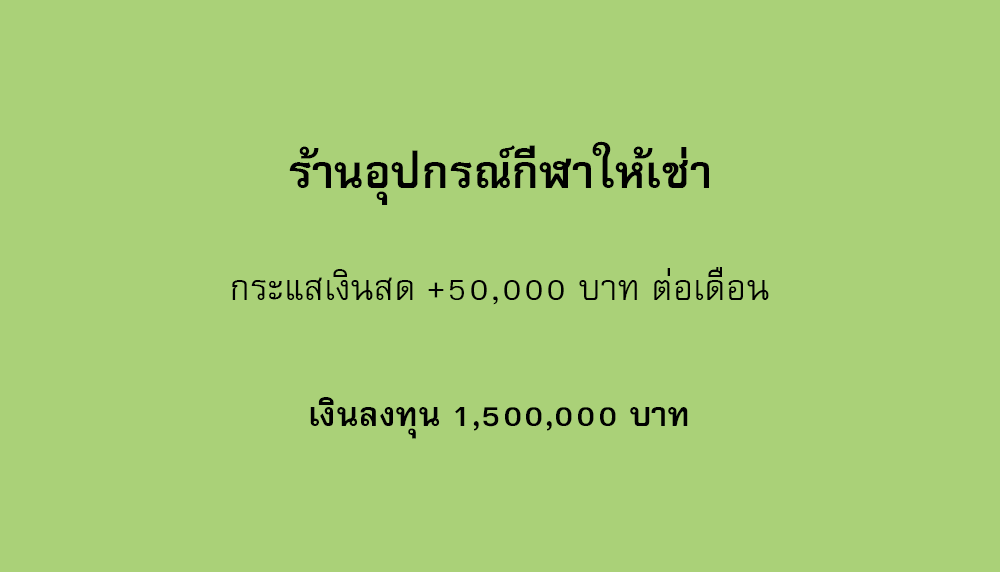
<style>
.page{position:relative;width:1000px;height:572px;background:#aad178}
.page>*{position:absolute;margin:0}
.t1{font:64px "FreesiaUPCBold";color:#000000}
.t2{font:50px "FreesiaUPC";color:#000000}
.t3{font:47px "FreesiaUPCBold";color:#000000}
</style>
<div class="page">
<p class="t1" style="left:289px;top:141px;width:420px;height:64px">ร้านอุปกรณ์กีฬาให้เช่า</p>
<p class="t2" style="left:232px;top:267px;width:537px;height:38px">กระแสเงินสด +50,000 บาท ต่อเดือน</p>
<p class="t3" style="left:310px;top:397px;width:378px;height:42px">เงินลงทุน 1,500,000 บาท</p>
</div>
